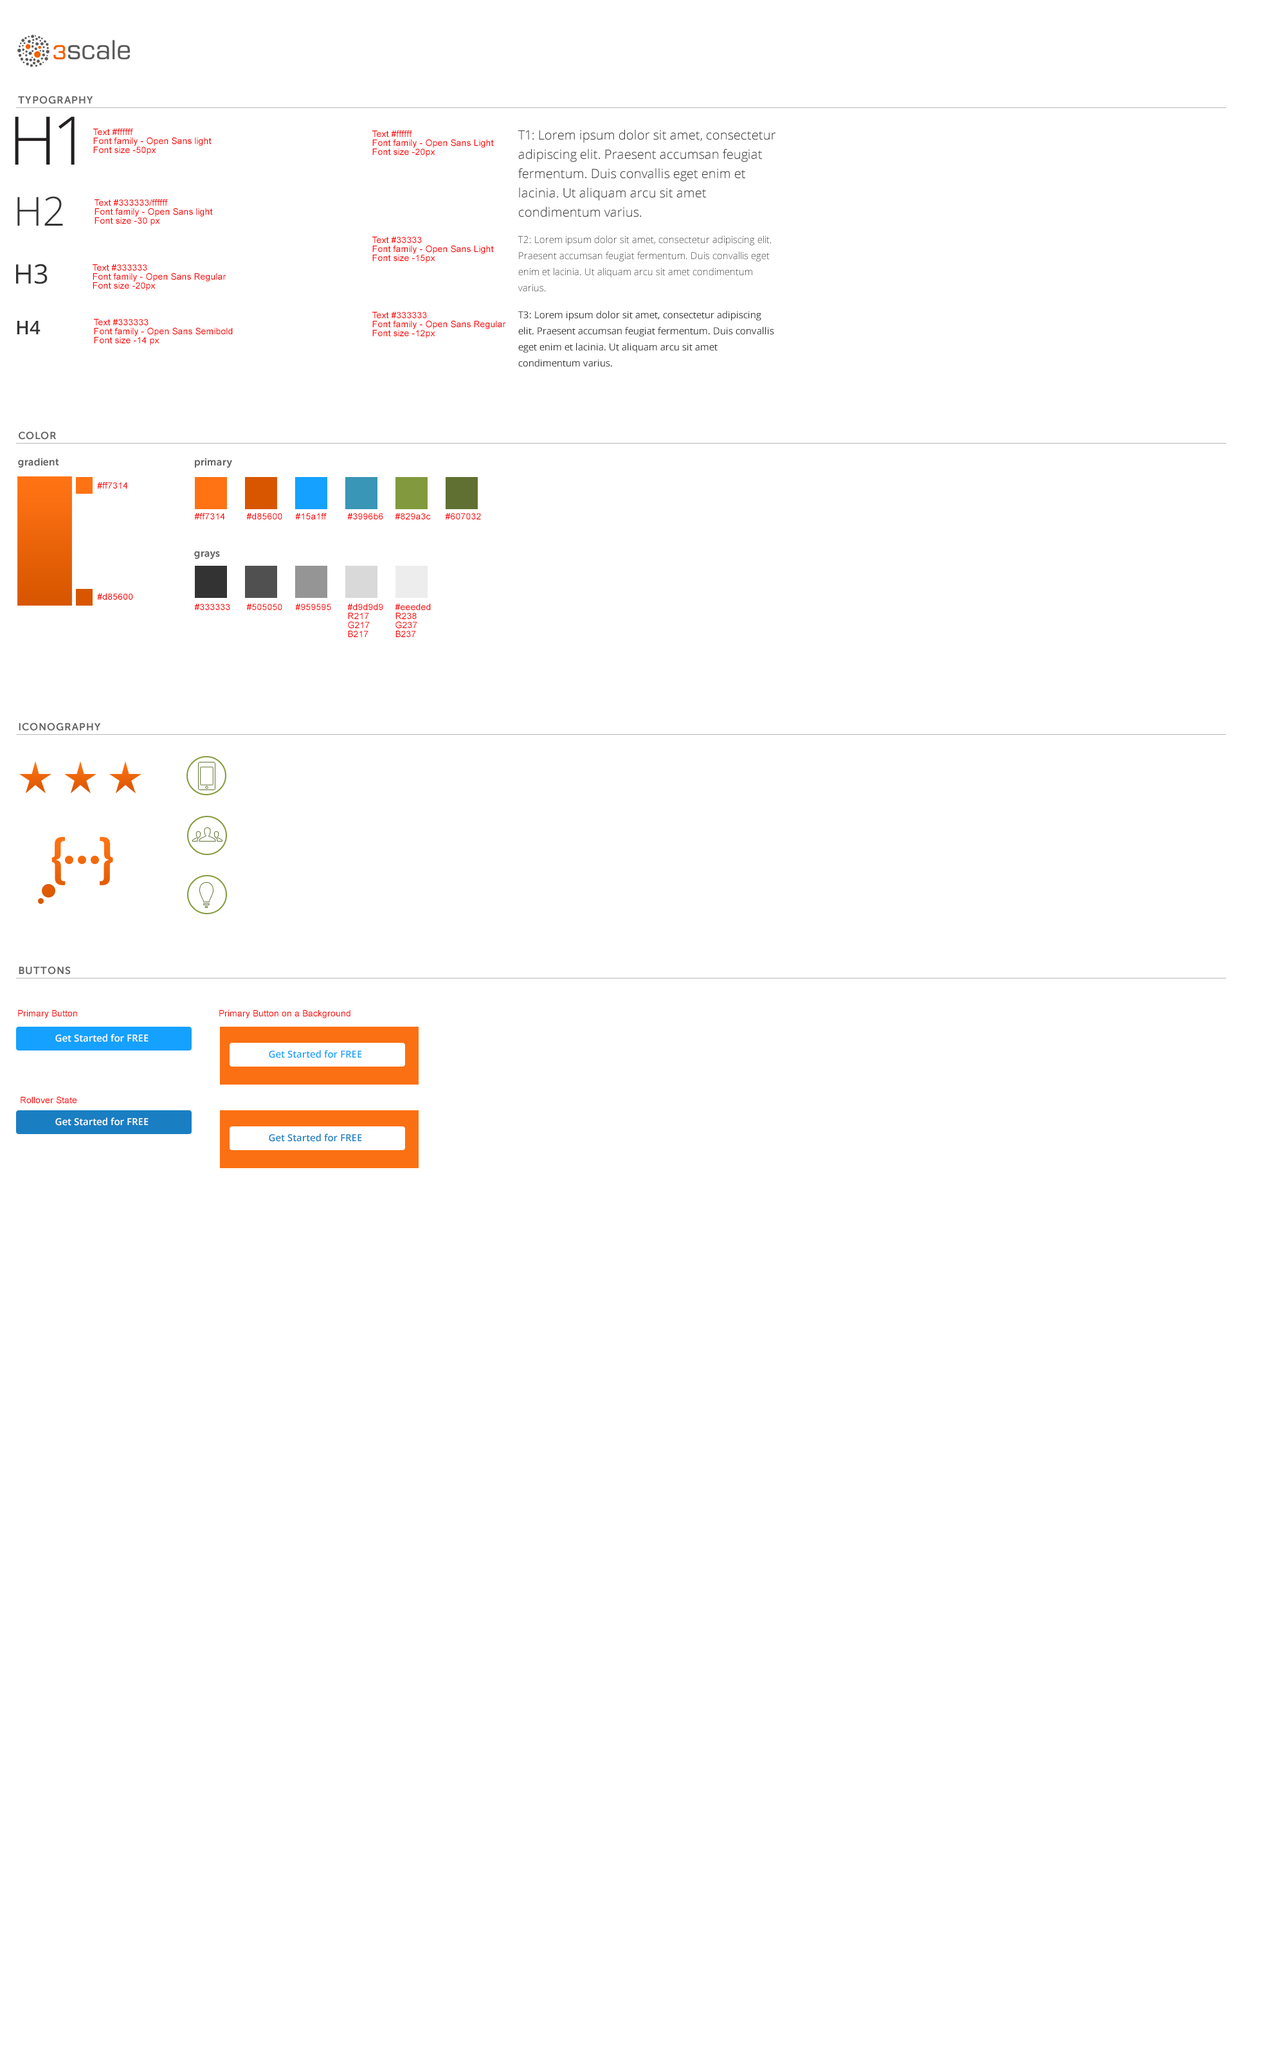
<style>
.page{position:relative;width:1286px;height:2047px;background:#ffffff}
.page>*{position:absolute;margin:0}
.t1{font:10.3px "MuseoSans-700";letter-spacing:0.06em;color:#616161;text-transform:uppercase}
.t2{font:67px "OpenSans-Light";color:#231f20}
.t3{font:9px/9px "ArialMT";color:#ff0000}
.t4{font:12.9px/19.3px "OpenSans-Light";color:#333333}
.t5{font:40.2px "OpenSans-Light";color:#333333}
.t6{font:9.6px/16.1px "OpenSans-Light";color:#333333}
.t7{font:26.8px "OpenSans";color:#333333}
.t8{font:9.6px/16.1px "OpenSans";color:#333333}
.t9{font:18.8px "OpenSans-Semibold";color:#333333}
.t10{font:10.3px "MuseoSans-700";color:#616161}
.t11{font:9px "ArialMT";color:#ff0000}
.t12{font:9.6px "OpenSans-Semibold";color:#ffffff}
.t13{font:9.6px "OpenSans-Semibold";color:#15a1ff}
.t14{font:9.6px "OpenSans-Semibold";color:#1a7ec2}
</style>
<div class="page">
<p class="t1" style="left:18px;top:96px;width:75px;height:8px">Typography</p>
<p class="t2" style="left:15px;top:116px;width:60px;height:49px">H1</p>
<p class="t3" style="left:93px;top:129px;width:119px;height:26px">Text #ffffff<br>Font family - Open Sans light<br>Font size -50px</p>
<p class="t3" style="left:372px;top:130px;width:122px;height:27px">Text #ffffff<br>Font family - Open Sans Light<br>Font size -20px</p>
<p class="t4" style="left:518px;top:129px;width:257px;height:88px">T1: Lorem ipsum dolor sit amet, consectetur adipiscing elit. Praesent accumsan feugiat fermentum. Duis convallis eget enim et lacinia. Ut aliquam arcu sit amet condimentum varius.</p>
<p class="t5" style="left:17px;top:196px;width:46px;height:30px">H2</p>
<p class="t3" style="left:94px;top:199px;width:119px;height:27px">Text #333333/ffffff<br>Font family - Open Sans light<br>Font size -30 px</p>
<p class="t3" style="left:372px;top:237px;width:122px;height:26px">Text #33333<br>Font family - Open Sans Light<br>Font size -15px</p>
<p class="t6" style="left:518px;top:235px;width:253px;height:57px">T2: Lorem ipsum dolor sit amet, consectetur adipiscing elit. Praesent accumsan feugiat fermentum. Duis convallis eget enim et lacinia. Ut aliquam arcu sit amet condimentum varius.</p>
<p class="t7" style="left:16px;top:264px;width:32px;height:20px">H3</p>
<p class="t3" style="left:93px;top:264px;width:133px;height:27px">Text #333333<br>Font family - Open Sans Regular<br>Font size -20px</p>
<p class="t3" style="left:372px;top:312px;width:134px;height:26px">Text #333333<br>Font family - Open Sans Regular<br>Font size -12px</p>
<p class="t8" style="left:518px;top:310px;width:256px;height:57px">T3: Lorem ipsum dolor sit amet, consectetur adipiscing elit. Praesent accumsan feugiat fermentum. Duis convallis eget enim et lacinia. Ut aliquam arcu sit amet condimentum varius.</p>
<p class="t9" style="left:17px;top:321px;width:23px;height:13px">H4</p>
<p class="t3" style="left:94px;top:319px;width:139px;height:26px">Text #333333<br>Font family - Open Sans Semibold<br>Font size -14 px</p>
<p class="t1" style="left:19px;top:431px;width:37px;height:9px">Color</p>
<p class="t10" style="left:18px;top:458px;width:41px;height:10px">gradient</p>
<p class="t10" style="left:195px;top:458px;width:37px;height:10px">primary</p>
<p class="t11" style="left:97px;top:482px;width:31px;height:7px">#ff7314</p>
<p class="t11" style="left:194px;top:513px;width:31px;height:6px">#ff7314</p>
<p class="t11" style="left:246px;top:513px;width:36px;height:6px">#d85600</p>
<p class="t11" style="left:295px;top:513px;width:32px;height:6px">#15a1ff</p>
<p class="t11" style="left:347px;top:513px;width:36px;height:6px">#3996b6</p>
<p class="t11" style="left:395px;top:513px;width:36px;height:6px">#829a3c</p>
<p class="t11" style="left:445px;top:513px;width:36px;height:6px">#607032</p>
<p class="t10" style="left:194px;top:551px;width:26px;height:8px">grays</p>
<p class="t11" style="left:97px;top:593px;width:36px;height:7px">#d85600</p>
<p class="t11" style="left:194px;top:604px;width:36px;height:6px">#333333</p>
<p class="t11" style="left:246px;top:604px;width:36px;height:6px">#505050</p>
<p class="t11" style="left:295px;top:604px;width:36px;height:6px">#959595</p>
<p class="t3" style="left:347px;top:604px;width:36px;height:33px">#d9d9d9<br>R217<br>G217<br>B217</p>
<p class="t3" style="left:395px;top:604px;width:36px;height:33px">#eeeded<br>R238<br>G237<br>B237</p>
<p class="t1" style="left:19px;top:723px;width:82px;height:8px">iconography</p>
<p class="t1" style="left:19px;top:966px;width:52px;height:9px">buttons</p>
<p class="t11" style="left:18px;top:1010px;width:59px;height:8px">Primary Button</p>
<p class="t11" style="left:219px;top:1010px;width:131px;height:8px">Primary Button on a Background</p>
<p class="t12" style="left:55px;top:1034px;width:93px;height:8px">Get Started for FREE</p>
<p class="t13" style="left:269px;top:1050px;width:93px;height:8px">Get Started for FREE</p>
<p class="t11" style="left:21px;top:1096px;width:56px;height:8px">Rollover State</p>
<p class="t12" style="left:55px;top:1117px;width:93px;height:9px">Get Started for FREE</p>
<p class="t14" style="left:269px;top:1133px;width:93px;height:9px">Get Started for FREE</p>
</div>
